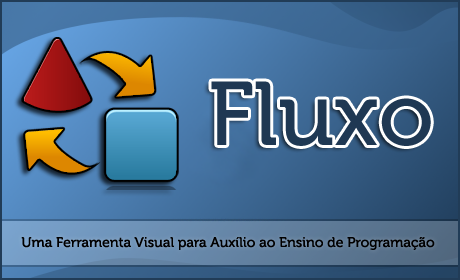
<style>
.page{position:relative;width:460px;height:280px}
.page>*{position:absolute;margin:0}
.t1{font:90px "Museo-500";color:#1f3853}
.t2{font:14px "Museo-500";color:#010000}
</style>
<div class="page">
<p class="t1" style="left:211px;top:81px;width:220px;height:65px">Fluxo</p>
<p class="t2" style="left:21px;top:237px;width:414px;height:13px">Uma Ferramenta Visual para Auxílio ao Ensino de Programação</p>
</div>
